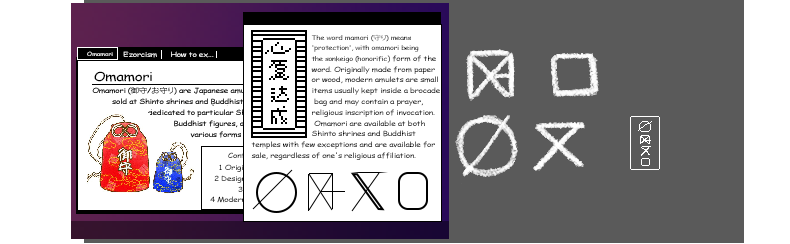
<style>
.page{position:relative;width:790px;height:244px;background:#ffffff}
.page>*{position:absolute;margin:0}
.t1{font:6.9px "ComicSansMS";letter-spacing:-0.03em;color:#000000;scale:1.22 1}
.t2{font:6.2px "ComicSansMS";letter-spacing:-0.03em;color:#000000;scale:1.22 1}
.t3{font:6.2px "KozGoPr6N-Regular";letter-spacing:-0.03em;color:#000000;scale:1.22 1}
.t4{font:5.4px "ComicSansMS";letter-spacing:-0.03em;scale:1.22 1}
.t5{font:6.9px "ComicSansMS";letter-spacing:-0.03em;scale:1.22 1}
.t6{font:6.9px "ComicSansMS";letter-spacing:-0.03em;color:#ffffff;scale:1.22 1}
.t7{font:12.3px "ComicSansMS";letter-spacing:-0.03em;color:#000000;scale:1.22 1}
</style>
<div class="page">
<p class="t1" style="left:311px;top:34px;width:129px;height:103px"><span class="t2">The word mamori (</span><span class="t3">守り</span><span class="t2">) means <br>'protection', with omamori being <br>the sonkeigo (honorific</span>) form of the <br>word. Originally made from paper <br>or wood, modern amulets are small <br>items usually kept inside a brocade<br> bag and may contain a prayer, <br>religious inscription of invocation.<br> Omamori are available at both <br>Shinto shrines and Buddhist</p>
<p class="t4" style="left:87px;top:51px;width:26px;height:5px">Omamori</p>
<p class="t5" style="left:123px;top:51px;width:34px;height:7px">Ezorcism</p>
<p class="t6" style="left:171px;top:51px;width:43px;height:7px">How to ex...</p>
<p class="t7" style="left:94px;top:71px;width:58px;height:11px">Omamori</p>
<p class="t1" style="left:251px;top:141px;width:184px;height:19px">temples with few exceptions and are available for <br>sale, regardless of one's religious affiliation.</p>
<p class="t5" style="left:228px;top:152px;width:57px;height:8px">Contents [hide]</p>
<p class="t5" style="left:219px;top:164px;width:67px;height:8px">1 Origin and usage</p>
</div>
